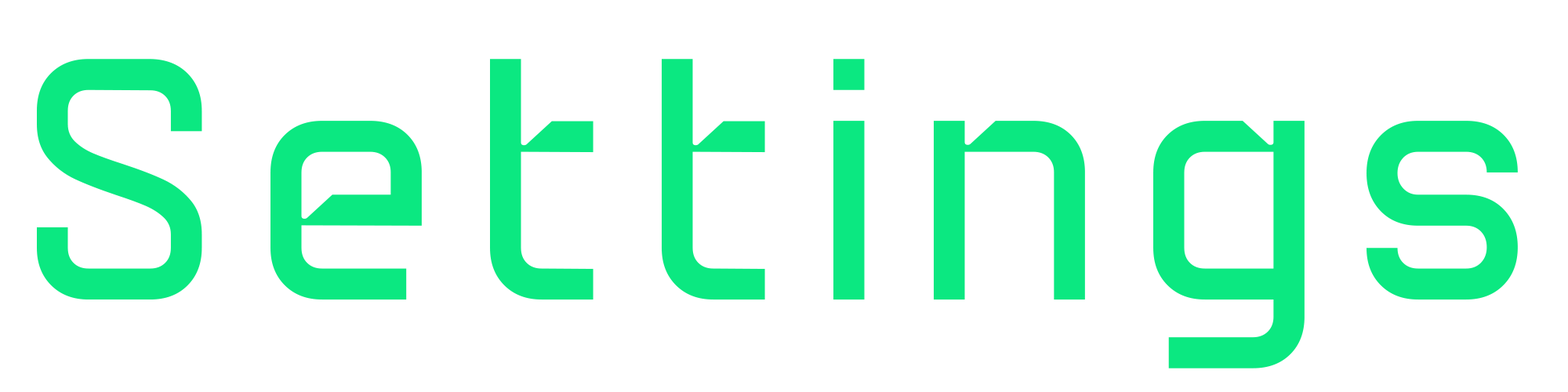
<style>
.page{position:relative;width:1568px;height:392px;background:#ffffff}
.page>*{position:absolute;margin:0}
.t1{font:343.5px "BF_Modernista-Light";letter-spacing:0.04em;color:#0be881}
</style>
<div class="page">
<p class="t1" style="left:37px;top:59px;width:1481px;height:309px">Settings</p>
</div>
